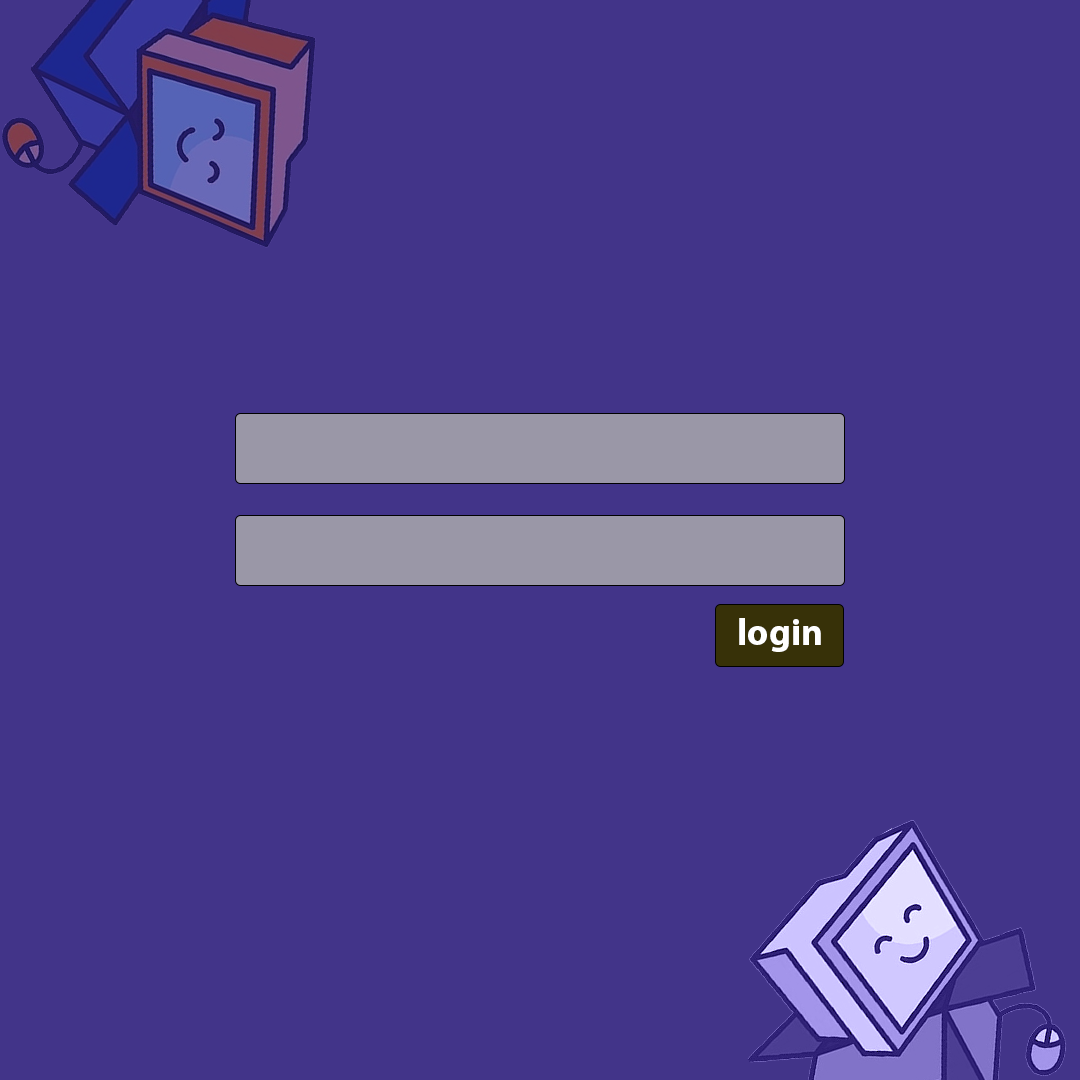
<style>
.page{position:relative;width:1080px;height:1080px;background:#423489}
.page>*{position:absolute;margin:0}
.t1{font:37.5px "MyriadPro-Bold";color:#ffffff}
</style>
<div class="page">
<p class="t1" style="left:739px;top:618px;width:82px;height:34px">login</p>
</div>
